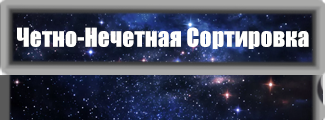
<style>
.page{position:relative;width:325px;height:120px}
.page>*{position:absolute;margin:0}
.t1{font:24px "Impact";color:#fffffd}
</style>
<div class="page">
<p class="t1" style="left:17px;top:27px;width:292px;height:22px">Четно-Нечетная Сортировка</p>
</div>
